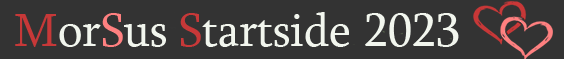
<style>
.page{position:relative;width:564px;height:59px;background:#333333}
.page>*{position:absolute;margin:0}
.t1{font:48px "Sylfaen";color:#f2f6ee}
.t2{font:48px "Sylfaen";color:#c73838}
.t3{font:48px "Sylfaen";color:#ff8080}
</style>
<div class="page">
<p class="t1" style="left:15px;top:12px;width:444px;height:35px"><span class="t2">M</span>or<span class="t3">S</span>us <span class="t2">S</span>tartside 2023</p>
</div>
